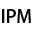
<style>
.page{position:relative;width:32px;height:32px;background:#ffffff}
.page>*{position:absolute;margin:0}
.t1{font:18px "AdobeFanHeitiStd-Bold";color:#000000}
</style>
<div class="page">
<p class="t1" style="left:2px;top:9px;width:29px;height:14px">IPM</p>
</div>
